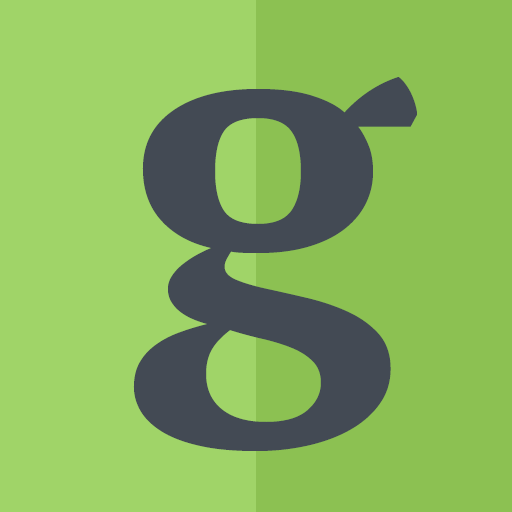
<style>
.page{position:relative;width:512px;height:512px;background:#a0d468}
.page>*{position:absolute;margin:0}
.t1{font:500px "PTSerif-Bold";color:#434a54}
</style>
<div class="page">
<p class="t1" style="left:133px;top:77px;width:284px;height:374px">g</p>
</div>
